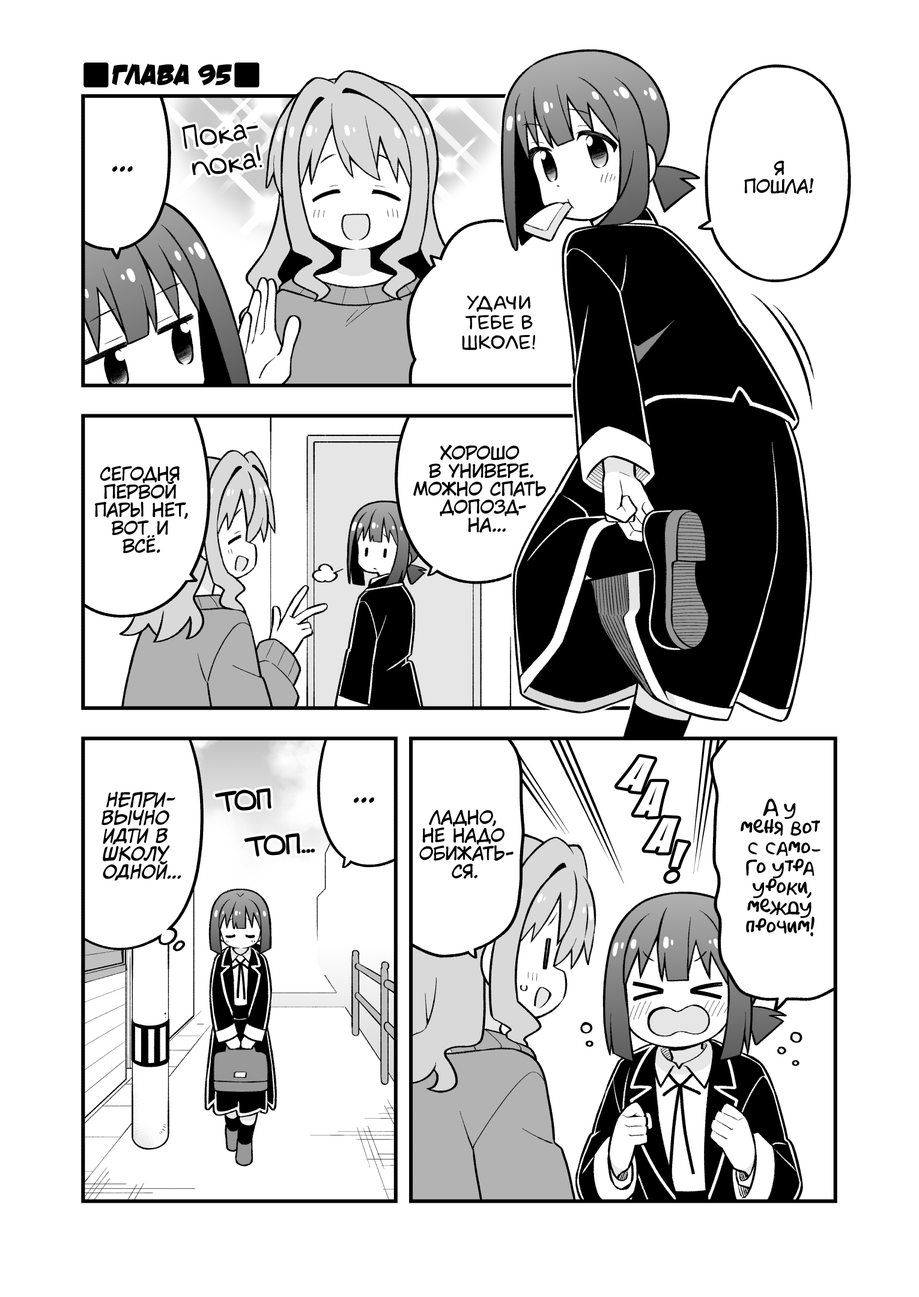
<style>
.page{position:relative;width:919px;height:1297px;background:#ffffff}
.page>*{position:absolute;margin:0}
.t1{font:28.8px "v_DamnNoisyKids";color:#000000;text-transform:uppercase}
.t2{font:30px "v_Augie";color:#000000;scale:0.9 1}
.t3{font:18px "KuraiVoice2";color:#000000;text-transform:uppercase}
.t4{font:28.8px "KuraiVoice2";color:#000000;text-transform:uppercase}
.t5{font:19.8px "laCartoonerie";color:#000000;text-transform:uppercase}
.t6{font:54.1px "BadaBoom";color:#ffffff}
.t7{font:18px "CCMeanwhile";color:#000000;text-transform:uppercase;font-style:italic}
.t8{font:25.2px "v_Augie";color:#000000;text-transform:uppercase}
.t9{font:19.8px "AkbarPlain";color:#000000}
</style>
<div class="page">
<p class="t1" style="left:112px;top:64px;width:120px;height:22px">Глава 95</p>
<p class="t2" style="left:181px;top:124px;width:81px;height:51px;text-align:center;rotate:-9deg">Пока-<br>пока!</p>
<p class="t3" style="left:744px;top:160px;width:70px;height:34px;text-align:center">Я<br>пошла!</p>
<p class="t4" style="left:112px;top:166px;width:21px;height:6px">...</p>
<p class="t5" style="left:462px;top:296px;width:73px;height:54px;text-align:center">Удачи<br>тебе в<br>школе!</p>
<p class="t3" style="left:413px;top:445px;width:133px;height:88px;text-align:center">Хорошо<br>в универе.<br>Можно спать<br>допозд-<br>на...</p>
<p class="t3" style="left:95px;top:466px;width:93px;height:88px;text-align:center">Сегодня<br>первой<br>пары нет,<br>вот и<br>всё.</p>
<p class="t6" style="left:617px;top:757px;width:38px;height:35px;rotate:19deg">а</p>
<p class="t6" style="left:634px;top:782px;width:33px;height:35px;rotate:10deg">а</p>
<p class="t7" style="left:102px;top:792px;width:79px;height:89px;text-align:center">Непри-<br>вычно<br>идти в<br>школу<br>одной...</p>
<p class="t8" style="left:216px;top:789px;width:55px;height:23px;rotate:-4deg">топ</p>
<p class="t4" style="left:354px;top:798px;width:20px;height:5px">...</p>
<p class="t3" style="left:419px;top:810px;width:95px;height:69px;text-align:center">Ладно,<br>не надо<br>обижать-<br>ся.</p>
<p class="t9" style="left:741px;top:799px;width:80px;height:138px;text-align:center">А у<br>меня вот<br>с само-<br>го утра<br>уроки,<br>между<br>прочим!</p>
<p class="t6" style="left:645px;top:818px;width:34px;height:35px;rotate:13deg">а</p>
<p class="t8" style="left:244px;top:834px;width:71px;height:23px;rotate:-4deg">топ...</p>
<p class="t6" style="left:666px;top:842px;width:22px;height:39px">!</p>
</div>
